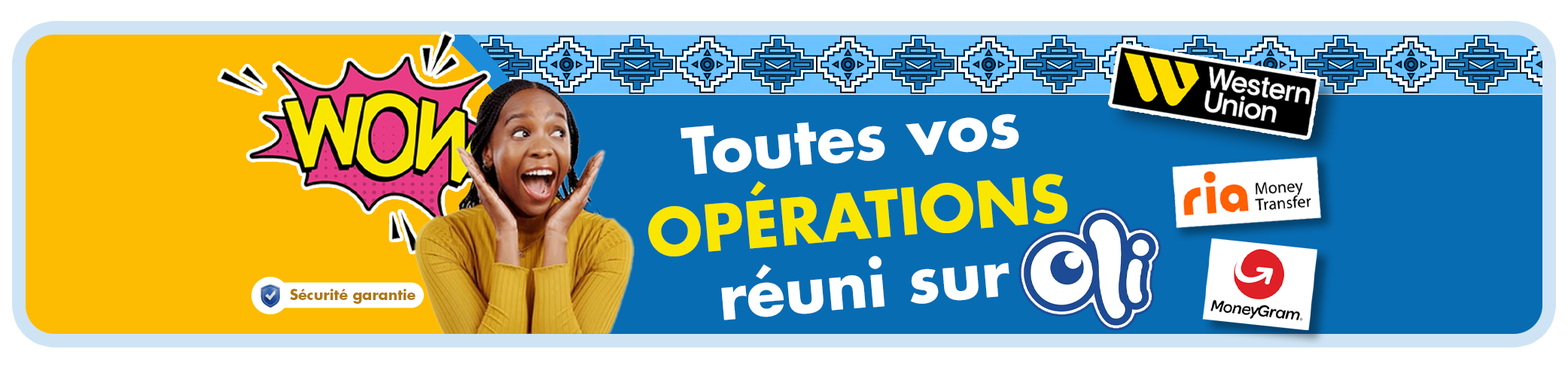
<style>
.page{position:relative;width:1568px;height:367px;background:#076cb2}
.page>*{position:absolute;margin:0}
.t1{font:62.7px "Futura-Bold";color:#ffffff}
.t2{font:62.7px/78.4px "Futura-Bold";color:#f9e701;text-transform:uppercase}
.t3{font:62.7px/69px "Futura-Bold";color:#ffffff}
.t4{font:14.2px "Futura-Bold";color:#b07715}
</style>
<div class="page">
<p class="t1" style="left:648px;top:114px;width:419px;height:207px;text-align:center;rotate:-5deg">Toutes vos <br><span class="t2">opérations <br></span><span class="t3">réuni sur</span></p>
<p class="t4" style="left:290px;top:288px;width:126px;height:16px">Sécurité garantie</p>
</div>
